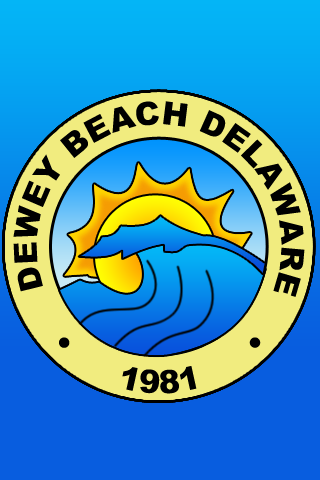
<style>
.page{position:relative;width:320px;height:480px;background:#085ddf}
.page>*{position:absolute;margin:0}
.t1{font:32px/18px "Arial-Black";color:#000000;text-transform:uppercase}
</style>
<div class="page">
<p class="t1" style="left:13px;top:101px;width:292px;height:196px">Dewey Beach Delaware</p>
<p class="t1" style="left:59px;top:337px;width:202px;height:57px">•      1981      •</p>
</div>
